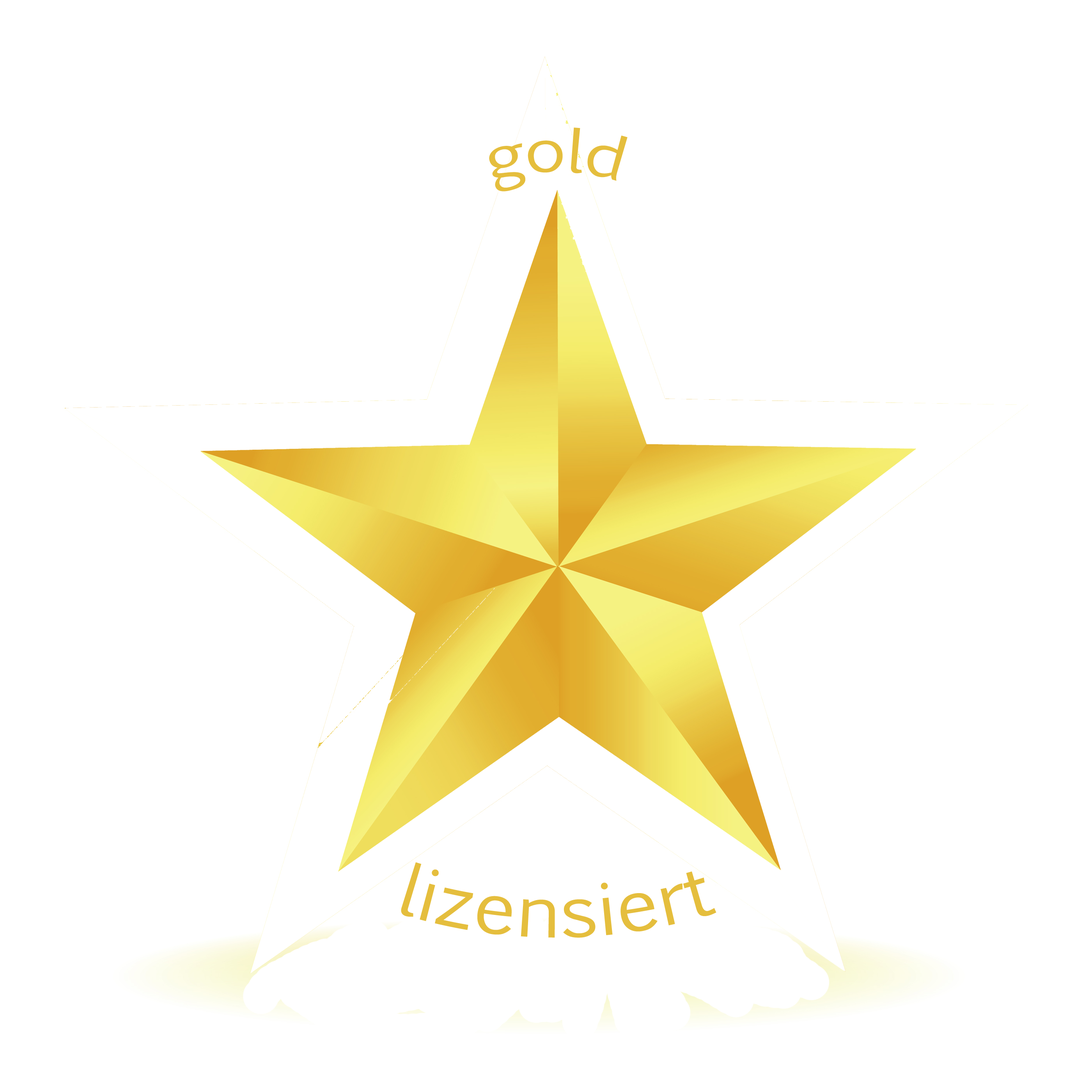
<style>
.page{position:relative;width:1092px;height:1092px;background:#ffffff}
.page>*{position:absolute;margin:0}
.t1{font:58.5px "EuphemiaCAS";color:#e5be3d}
.t2{font:70.2px "EuphemiaCAS";color:#e5be3d}
</style>
<div class="page">
<p class="t1" style="left:489px;top:128px;width:139px;height:63px">gold</p>
<p class="t2" style="left:401px;top:862px;width:315px;height:76px">lizensiert</p>
</div>
